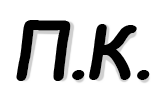
<style>
.page{position:relative;width:164px;height:90px;background:#ffffff}
.page>*{position:absolute;margin:0}
.t1{font:75px "ComicSansMS-BoldItalic";color:#000000}
</style>
<div class="page">
<p class="t1" style="left:16px;top:20px;width:55px;height:61px">П</p>
<p class="t1" style="left:89px;top:24px;width:48px;height:56px">К</p>
<p class="t1" style="left:72px;top:70px;width:13px;height:10px">.</p>
<p class="t1" style="left:137px;top:70px;width:13px;height:10px">.</p>
</div>
